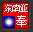
<style>
.page{position:relative;width:33px;height:32px;background:#f20000}
.page>*{position:absolute;margin:0}
.t1{font:10.4px "SimSun";letter-spacing:-0.25em;color:#ffffff}
.t2{font:11.7px "SimSun";color:#ffffff}
</style>
<div class="page">
<p class="t1" style="left:4px;top:4px;width:24px;height:9px">东南亚</p>
<p class="t2" style="left:16px;top:15px;width:11px;height:12px">奉</p>
</div>
